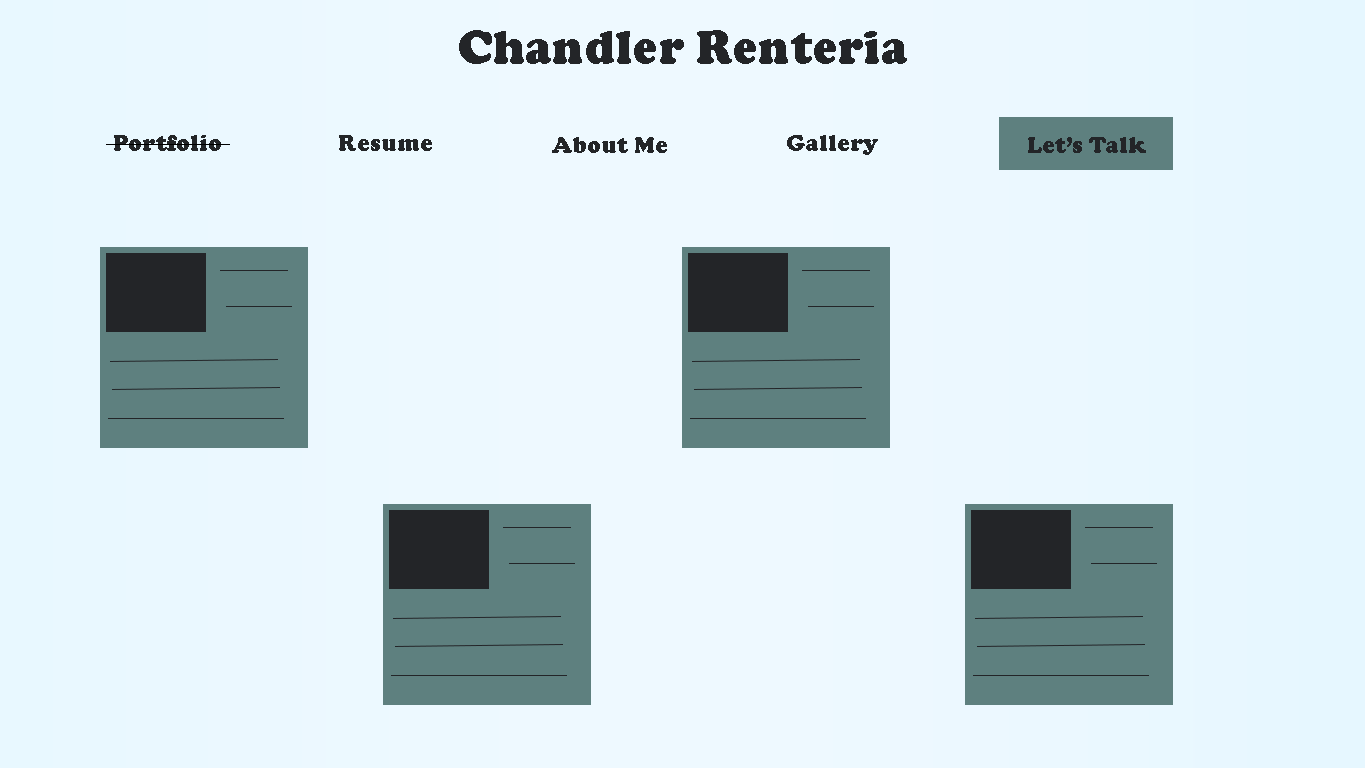
<style>
.page{position:relative;width:1366px;height:768px}
.page>*{position:absolute;margin:0}
.t1{font:48px "CooperBlack";color:#232528}
.t2{font:24px "CooperBlack";color:#232528}
</style>
<div class="page">
<p class="t1" style="left:459px;top:30px;width:448px;height:34px">Chandler Renteria</p>
<p class="t2" style="left:114px;top:135px;width:107px;height:16px">Portfolio</p>
<p class="t2" style="left:339px;top:135px;width:93px;height:16px">Resume</p>
<p class="t2" style="left:552px;top:137px;width:115px;height:16px">About Me</p>
<p class="t2" style="left:787px;top:135px;width:91px;height:20px">Gallery</p>
<p class="t2" style="left:1028px;top:137px;width:118px;height:16px">Let’s Talk</p>
</div>
